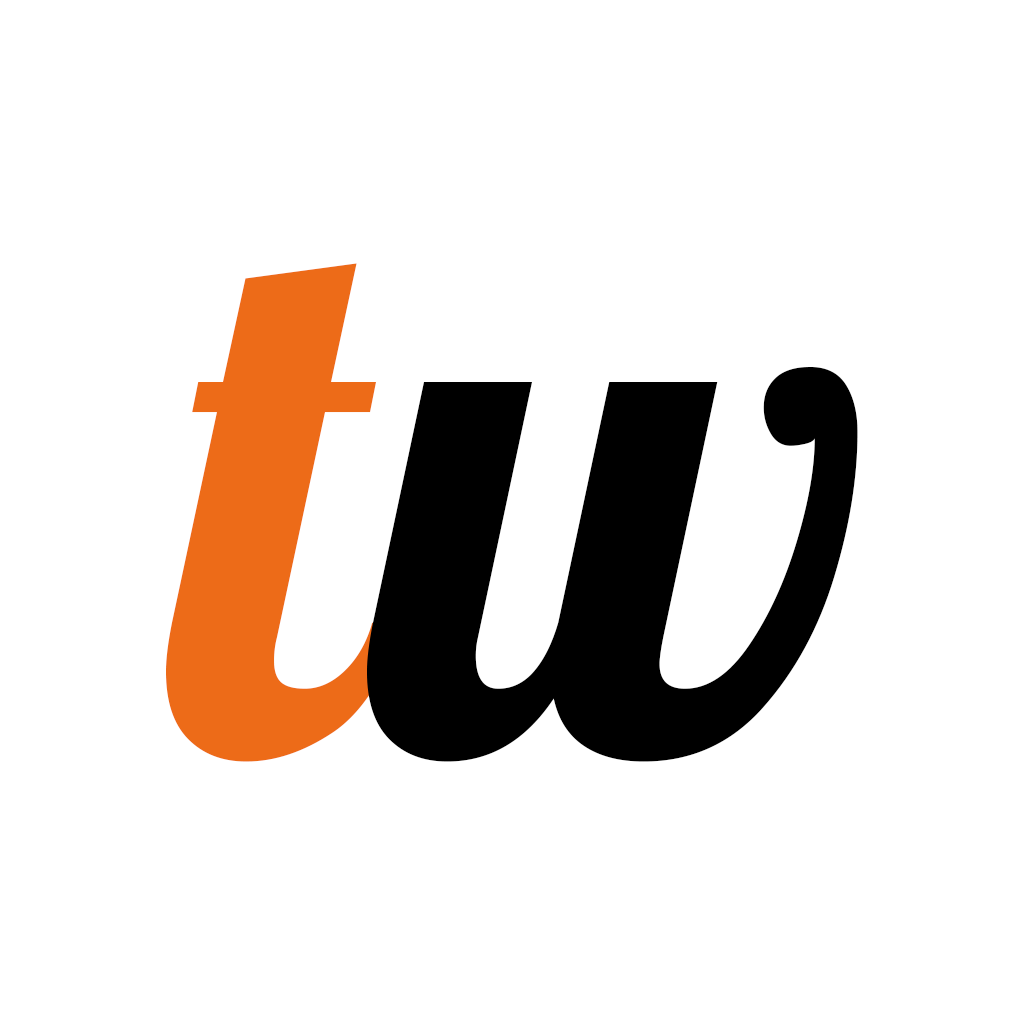
<style>
.page{position:relative;width:1024px;height:1024px;background:#ffffff}
.page>*{position:absolute;margin:0}
.t1{font:750px "Lobster-Regular";color:#ed6b18}
.t2{font:750px "Lobster-Regular";color:#000000}
</style>
<div class="page">
<p class="t1" style="left:166px;top:263px;width:692px;height:499px">t<span class="t2">w</span></p>
</div>
